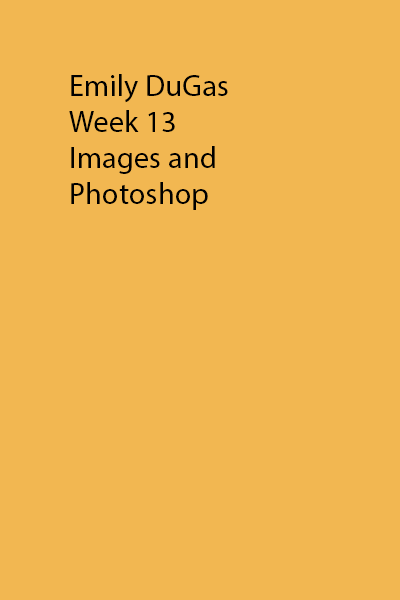
<style>
.page{position:relative;width:400px;height:600px;background:#f2b751}
.page>*{position:absolute;margin:0}
.t1{font:30px "MyriadPro-Regular";letter-spacing:0.01em;color:#000000}
</style>
<div class="page">
<p class="t1" style="left:69px;top:74px;width:159px;height:136px">Emily DuGas<br>Week 13 <br>Images and <br>Photoshop</p>
</div>
